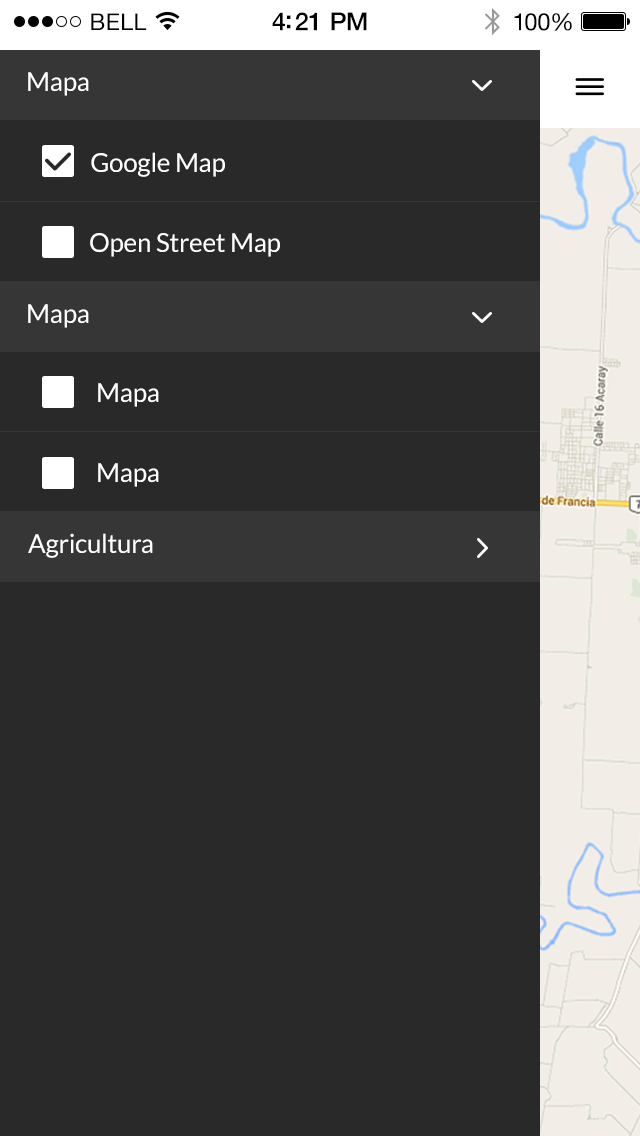
<style>
.page{position:relative;width:640px;height:1136px;background:#292929}
.page>*{position:absolute;margin:0}
.t1{font:23px "HelveticaNeue";letter-spacing:0.02em;color:#000000}
.t2{font:25px "HelveticaNeue-Medium";letter-spacing:-0.02em;color:#000000}
.t3{font:24px "HelveticaNeue";letter-spacing:-0.02em;color:#010101}
.t4{font:26px "Lato-Regular";letter-spacing:-0.01em;color:#ffffff}
</style>
<div class="page">
<p class="t1" style="left:91px;top:13px;width:56px;height:17px">BELL</p>
<p class="t2" style="left:272px;top:12px;width:95px;height:19px">4:21 PM</p>
<p class="t3" style="left:514px;top:13px;width:58px;height:18px">100%</p>
<p class="t4" style="left:28px;top:72px;width:61px;height:24px">Mapa</p>
<p class="t4" style="left:91px;top:152px;width:134px;height:25px">Google Map</p>
<p class="t4" style="left:90px;top:233px;width:190px;height:24px">Open Street Map</p>
<p class="t4" style="left:28px;top:304px;width:61px;height:24px">Mapa</p>
<p class="t4" style="left:98px;top:383px;width:61px;height:24px">Mapa</p>
<p class="t4" style="left:98px;top:463px;width:61px;height:24px">Mapa</p>
<p class="t4" style="left:28px;top:533px;width:125px;height:25px">Agricultura</p>
</div>
